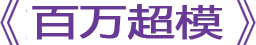
<style>
.page{position:relative;width:256px;height:45px;background:#ffffff}
.page>*{position:absolute;margin:0}
.t1{font:36px "MicrosoftYaHei";color:#693996;font-weight:bold;scale:1.3 1}
</style>
<div class="page">
<p class="t1" style="left:32px;top:4px;width:191px;height:36px">百万超模</p>
</div>
